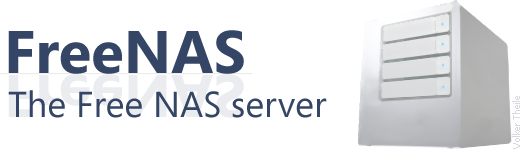
<style>
.page{position:relative;width:520px;height:149px;background:#ffffff}
.page>*{position:absolute;margin:0}
.t1{font:60px "SegoeUI-Bold";color:#344565}
.t2{font:36px "SegoeUI-Regular";color:#344565}
.t3{font:9px "Tahoma";color:#d6dae0}
</style>
<div class="page">
<p class="t1" style="left:8px;top:30px;width:236px;height:44px">FreeNAS</p>
<p class="t2" style="left:8px;top:90px;width:319px;height:28px">The Free NAS server</p>
<p class="t3" style="left:512px;top:96px;width:8px;height:53px;rotate:-90deg">Volker Theile</p>
</div>
